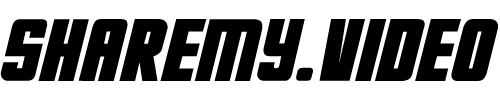
<style>
.page{position:relative;width:500px;height:100px;background:#ffffff}
.page>*{position:absolute;margin:0}
.t1{font:84.2px "HesDeadJim";color:#000000}
</style>
<div class="page">
<p class="t1" style="left:0px;top:19px;width:498px;height:62px">sharemy.video</p>
</div>
